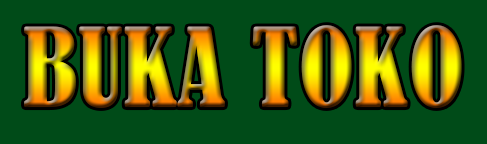
<style>
.page{position:relative;width:487px;height:144px;background:#004b18}
.page>*{position:absolute;margin:0}
.t1{font:24.4px "BernardMT-Condensed"}
</style>
<div class="page">
<p class="t1" style="left:24px;top:25px;width:438px;height:83px;text-align:center">BUKA TOKO</p>
</div>
